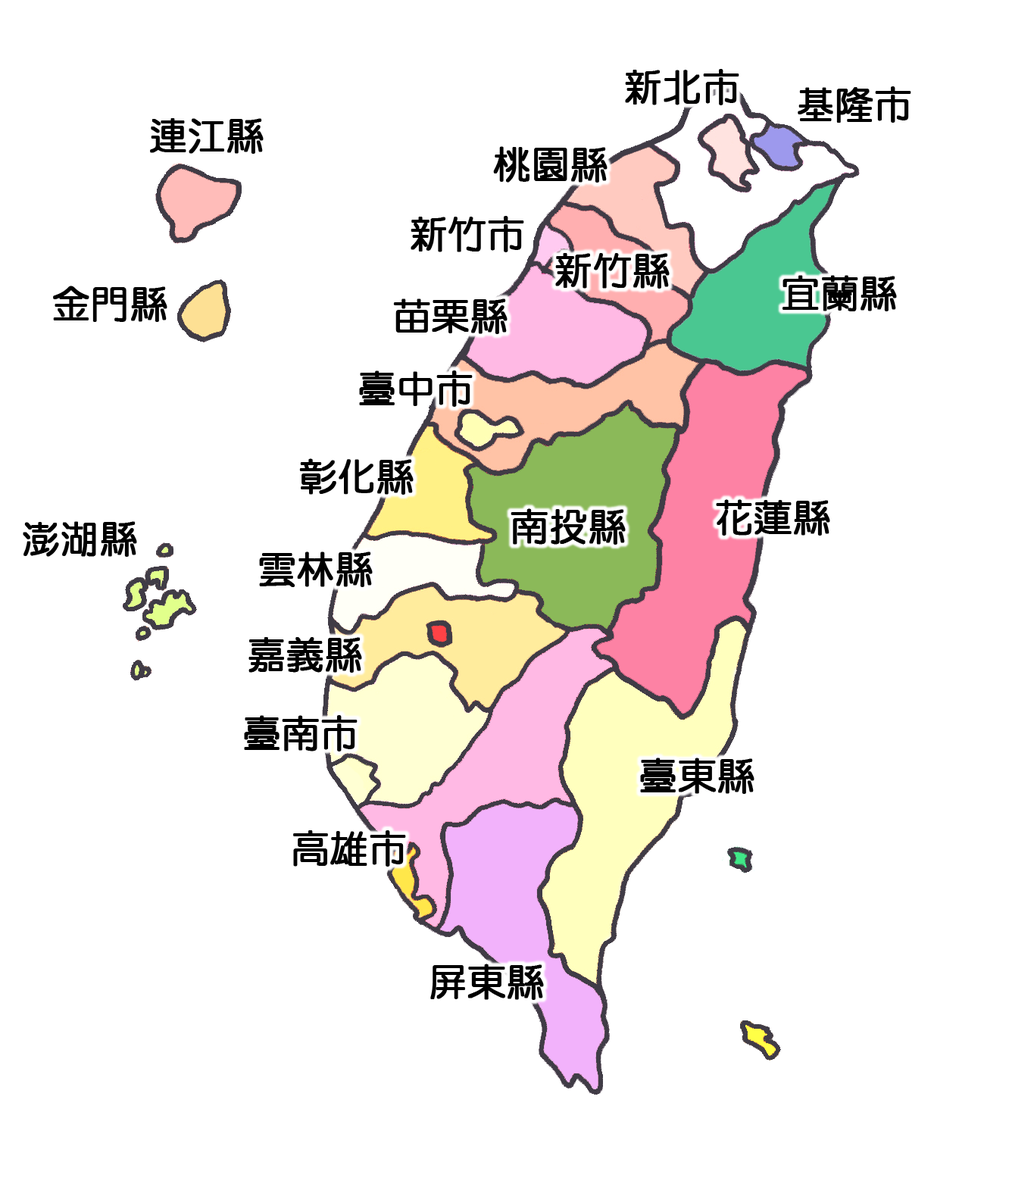
<style>
.page{position:relative;width:1009px;height:1181px;background:#ffffff}
.page>*{position:absolute;margin:0}
.t1{font:37.9px "DFYuan-W5-WIN-BF";color:#000000;font-weight:bold}
</style>
<div class="page">
<p class="t1" style="left:625px;top:69px;width:115px;height:36px">新北市</p>
<p class="t1" style="left:798px;top:86px;width:114px;height:37px">基隆市</p>
<p class="t1" style="left:150px;top:118px;width:114px;height:36px">連江縣</p>
<p class="t1" style="left:493px;top:146px;width:115px;height:37px">桃園縣</p>
<p class="t1" style="left:411px;top:216px;width:113px;height:36px">新竹市</p>
<p class="t1" style="left:555px;top:253px;width:115px;height:36px">新竹縣</p>
<p class="t1" style="left:783px;top:275px;width:114px;height:36px">宜蘭縣</p>
<p class="t1" style="left:53px;top:286px;width:114px;height:36px">金門縣</p>
<p class="t1" style="left:393px;top:299px;width:115px;height:35px">苗栗縣</p>
<p class="t1" style="left:359px;top:371px;width:114px;height:36px">臺中市</p>
<p class="t1" style="left:299px;top:458px;width:115px;height:37px">彰化縣</p>
<p class="t1" style="left:511px;top:508px;width:115px;height:37px">南投縣</p>
<p class="t1" style="left:716px;top:499px;width:115px;height:37px">花蓮縣</p>
<p class="t1" style="left:23px;top:521px;width:114px;height:36px">澎湖縣</p>
<p class="t1" style="left:259px;top:552px;width:114px;height:35px">雲林縣</p>
<p class="t1" style="left:249px;top:637px;width:113px;height:36px">嘉義縣</p>
<p class="t1" style="left:244px;top:715px;width:114px;height:37px">臺南市</p>
<p class="t1" style="left:640px;top:758px;width:115px;height:36px">臺東縣</p>
<p class="t1" style="left:293px;top:831px;width:113px;height:36px">高雄市</p>
<p class="t1" style="left:430px;top:964px;width:114px;height:36px">屏東縣</p>
</div>
